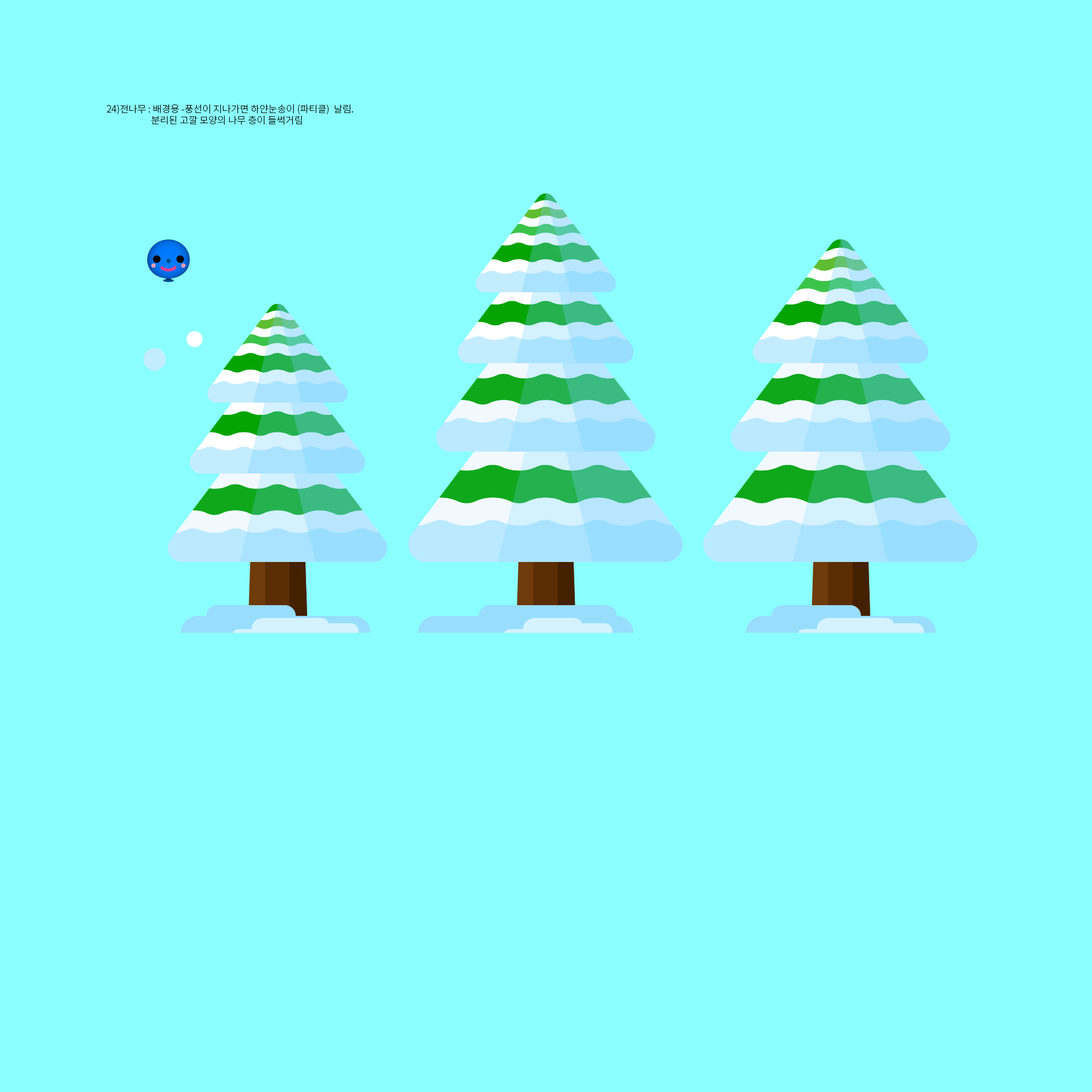
<style>
.page{position:relative;width:1092px;height:1092px;background:#8afffd}
.page>*{position:absolute;margin:0}
.t1{font:9.6px "NotoSansCJKkr-Light";color:#000000}
</style>
<div class="page">
<p class="t1" style="left:107px;top:104px;width:247px;height:21px">24)전나무 : 배경용 -풍선이 지나가면 하얀눈송이 (파티클)  날림.  <br>                     분리된 고깔 모양의 나무 층이 들썩거림</p>
</div>
